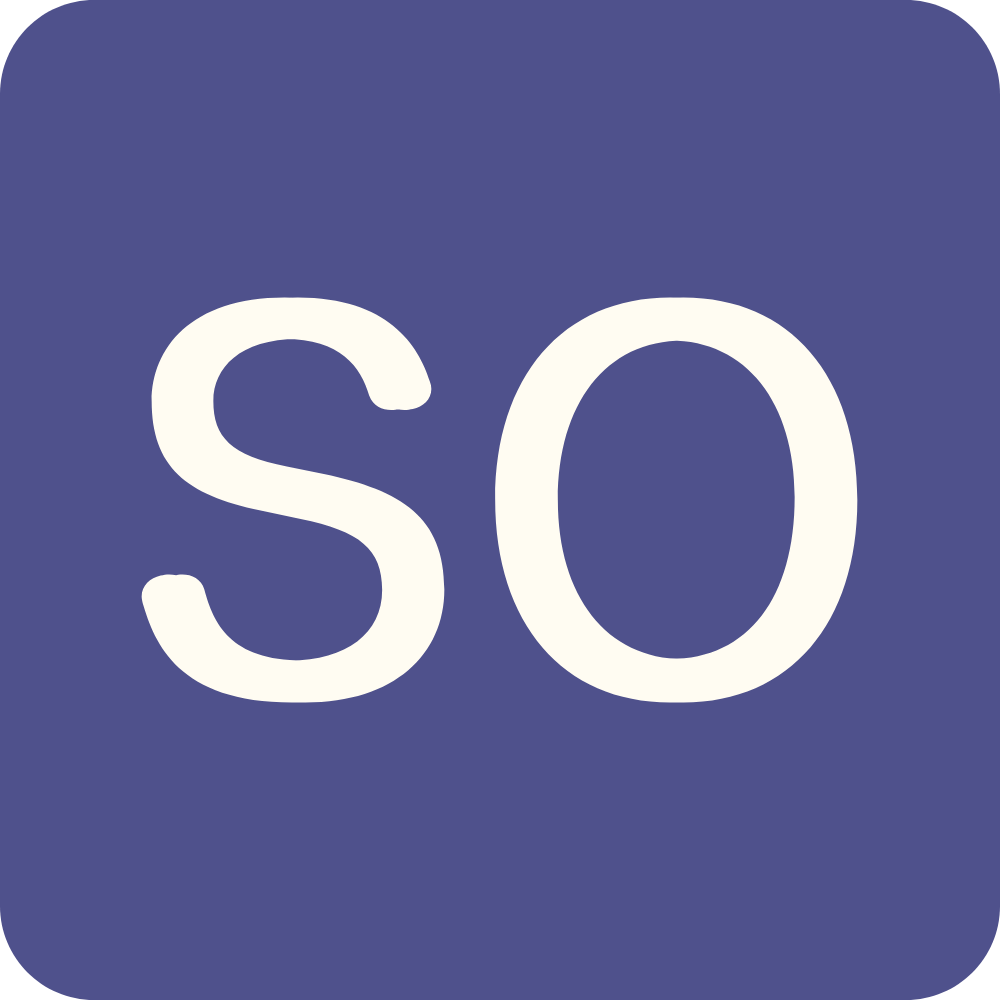
<style>
.page{position:relative;width:1000px;height:1000px;background:#4f518c}
.page>*{position:absolute;margin:0}
.t1{font:500px "HiraMaruProN-W4";color:#fffcf2;font-weight:bold}
</style>
<div class="page">
<p class="t1" style="left:141px;top:297px;width:717px;height:406px">SO</p>
</div>
